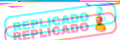
<style>
.page{position:relative;width:120px;height:40px;background:#ffffff}
.page>*{position:absolute;margin:0}
.t1{font:12px "Arial-Black"}
</style>
<div class="page">
<p class="t1" style="left:12px;top:12px;width:77px;height:20px;rotate:-8deg">REPLICADO</p>
</div>
